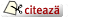
<style>
.page{position:relative;width:100px;height:18px;background:#ffffff}
.page>*{position:absolute;margin:0}
.t1{font:12px "MetaMedium-Roman";letter-spacing:-0.01em;color:#9f0002}
</style>
<div class="page">
<p class="t1" style="left:24px;top:5px;width:36px;height:10px">citeazä</p>
</div>
